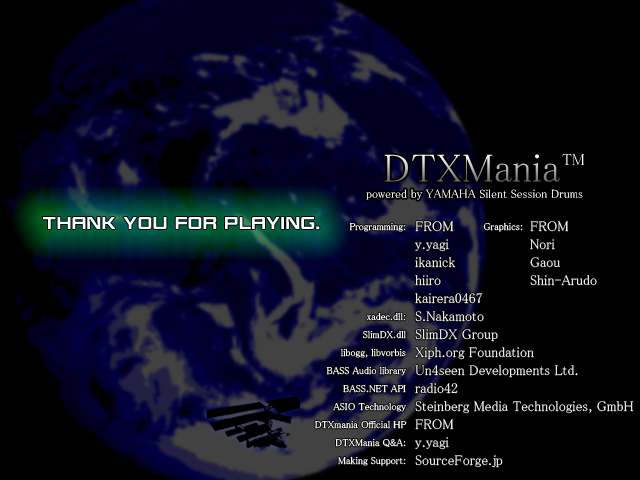
<style>
.page{position:relative;width:640px;height:480px;background:#000000}
.page>*{position:absolute;margin:0}
.t1{font:40px "MS-PMincho"}
.t2{font:16px "MS-PMincho";color:#ffffff}
.t3{font:12px "MS-PMincho";color:#ffffff}
.t4{font:18px "DFSoGeiI-W6-WINP-RKSJ-H";letter-spacing:0.025em;color:#f7feff;font-weight:bold}
.t5{font:14px/18px "MS-PMincho";color:#ffffff}
.t6{font:10px "MS-PMincho";color:#ffffff}
.t7{font:10px/18px "MS-PMincho";color:#ffffff}
</style>
<div class="page">
<p class="t1" style="left:384px;top:154px;width:176px;height:28px">DTXMania</p>
<p class="t2" style="left:562px;top:154px;width:22px;height:11px">TM</p>
<p class="t3" style="left:366px;top:189px;width:217px;height:11px">powered by YAMAHA Silent Session Drums</p>
<p class="t4" style="left:43px;top:217px;width:277px;height:13px">THANK YOU FOR PLAYING.</p>
<p class="t5" style="left:415px;top:221px;width:219px;height:247px">FROM<br>y.yagi<br>ikanick<br>hiiro<br>kairera0467<br>S.Nakamoto<br>SlimDX Group<br>Xiph.org Foundation<br>Un4seen Developments Ltd.<br>radio42<br>Steinberg Media Technologies, GmbH<br>FROM<br>y.yagi<br>SourceForge.jp</p>
<p class="t6" style="left:483px;top:222px;width:40px;height:10px">Graphics:</p>
<p class="t5" style="left:530px;top:221px;width:67px;height:65px">FROM<br>Nori<br>Gaou<br>Shin-Arudo</p>
<p class="t7" style="left:315px;top:223px;width:92px;height:243px;text-align:right">Programming:<br><br><br><br><br>xadec.dll:<br>SlimDX.dll<br>libogg, libvorbis<br>BASS Audio library<br>BASS.NET API<br>ASIO Technology<br>DTXmania Official HP<br>DTXMania Q&amp;A:<br>Making Support:</p>
</div>
